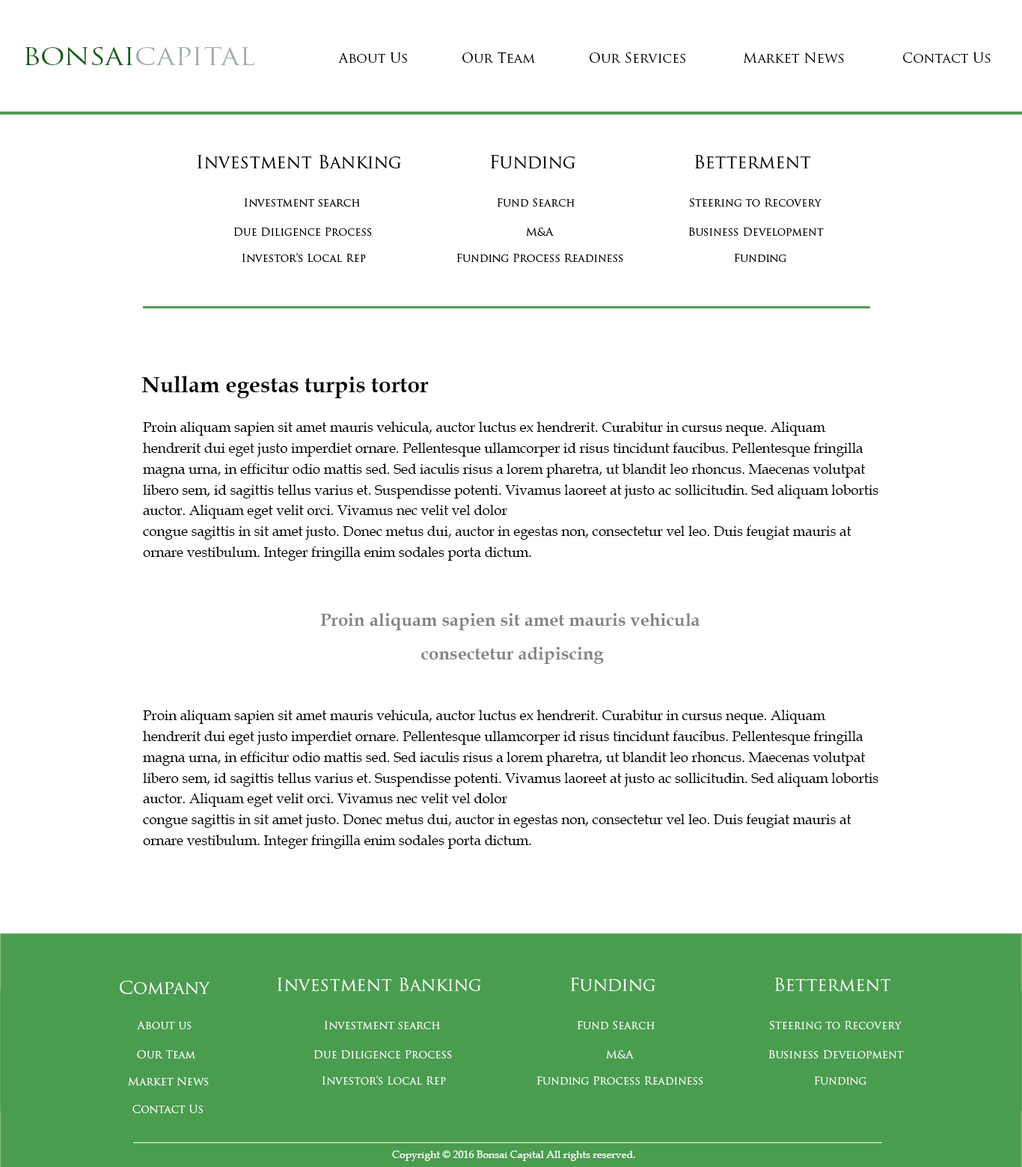
<style>
.page{position:relative;width:1022px;height:1167px;background:#ffffff}
.page>*{position:absolute;margin:0}
.t1{font:23.2px "TrajanPro-Regular";color:#a2ada5;scale:1.15 1}
.t2{font:23.2px "TrajanPro-Regular";color:#0e5c11;scale:1.15 1}
.t3{font:13.6px "TrajanPro-Regular";color:#000000}
.t4{font:18px "TrajanPro-Regular";color:#000000}
.t5{font:10.9px "TrajanPro-Regular";color:#000000}
.t6{font:22.4px "BookAntiqua-Bold";color:#000000}
.t7{font:13.9px/10.4px "BookAntiqua";color:#000000}
.t8{font:18px/11.2px "BookAntiqua-Bold";color:#828282}
.t9{font:18px "TrajanPro-Regular";color:#ffffff}
.t10{font:10.9px "TrajanPro-Regular";color:#ffffff}
.t11{font:10.5px "BookAntiqua";color:#ffffff}
</style>
<div class="page">
<p class="t1" style="left:25px;top:47px;width:229px;height:18px"><span class="t2">BONSAI</span>CAPITAL</p>
<p class="t3" style="left:338px;top:52px;width:69px;height:11px">About Us</p>
<p class="t3" style="left:462px;top:52px;width:73px;height:11px">Our Team</p>
<p class="t3" style="left:590px;top:52px;width:95px;height:11px">Our Services</p>
<p class="t3" style="left:743px;top:52px;width:101px;height:11px">Market News</p>
<p class="t3" style="left:903px;top:52px;width:88px;height:11px">Contact Us</p>
<p class="t4" style="left:198px;top:155px;width:203px;height:13px">Investment Banking</p>
<p class="t4" style="left:490px;top:155px;width:85px;height:14px">Funding</p>
<p class="t4" style="left:695px;top:155px;width:115px;height:13px">Betterment</p>
<p class="t5" style="left:245px;top:198px;width:115px;height:9px">Investment search</p>
<p class="t5" style="left:497px;top:198px;width:78px;height:9px">Fund Search</p>
<p class="t5" style="left:690px;top:198px;width:132px;height:9px">Steering to Recovery</p>
<p class="t5" style="left:233px;top:227px;width:139px;height:9px">Due Diligence Process</p>
<p class="t5" style="left:526px;top:227px;width:28px;height:9px">M&amp;A</p>
<p class="t5" style="left:688px;top:227px;width:136px;height:9px">Business Development</p>
<p class="t5" style="left:242px;top:253px;width:124px;height:9px">Investor’s Local Rep</p>
<p class="t5" style="left:456px;top:254px;width:167px;height:8px">Funding Process Readiness</p>
<p class="t5" style="left:734px;top:254px;width:52px;height:8px">Funding</p>
<p class="t6" style="left:141px;top:376px;width:288px;height:22px">Nullam egestas turpis tortor</p>
<p class="t7" style="left:143px;top:421px;width:735px;height:139px;text-align:right">Proin aliquam sapien sit amet mauris vehicula, auctor luctus ex hendrerit. Curabitur in cursus neque. Aliquam <br><br>hendrerit dui eget justo imperdiet ornare. Pellentesque ullamcorper id risus tincidunt faucibus. Pellentesque fringilla <br><br>magna urna, in efficitur odio mattis sed. Sed iaculis risus a lorem pharetra, ut blandit leo rhoncus. Maecenas volutpat <br><br>libero sem, id sagittis tellus varius et. Suspendisse potenti. Vivamus laoreet at justo ac sollicitudin. Sed aliquam lobortis <br><br>auctor. Aliquam eget velit orci. Vivamus nec velit vel dolor <br><br>congue sagittis in sit amet justo. Donec metus dui, auctor in egestas non, consectetur vel leo. Duis feugiat mauris at <br><br>ornare vestibulum. Integer fringilla enim sodales porta dictum.</p>
<p class="t8" style="left:320px;top:613px;width:380px;height:51px;text-align:center">Proin aliquam sapien sit amet mauris vehicula<br><br><br> consectetur adipiscing</p>
<p class="t7" style="left:143px;top:709px;width:735px;height:140px;text-align:right">Proin aliquam sapien sit amet mauris vehicula, auctor luctus ex hendrerit. Curabitur in cursus neque. Aliquam <br><br>hendrerit dui eget justo imperdiet ornare. Pellentesque ullamcorper id risus tincidunt faucibus. Pellentesque fringilla <br><br>magna urna, in efficitur odio mattis sed. Sed iaculis risus a lorem pharetra, ut blandit leo rhoncus. Maecenas volutpat <br><br>libero sem, id sagittis tellus varius et. Suspendisse potenti. Vivamus laoreet at justo ac sollicitudin. Sed aliquam lobortis <br><br>auctor. Aliquam eget velit orci. Vivamus nec velit vel dolor <br><br>congue sagittis in sit amet justo. Donec metus dui, auctor in egestas non, consectetur vel leo. Duis feugiat mauris at <br><br>ornare vestibulum. Integer fringilla enim sodales porta dictum.</p>
<p class="t9" style="left:278px;top:977px;width:203px;height:14px">Investment Banking</p>
<p class="t9" style="left:570px;top:977px;width:85px;height:14px">Funding</p>
<p class="t9" style="left:775px;top:977px;width:115px;height:14px">Betterment</p>
<p class="t9" style="left:120px;top:980px;width:90px;height:14px">Company</p>
<p class="t10" style="left:137px;top:1021px;width:55px;height:8px">About us</p>
<p class="t10" style="left:325px;top:1021px;width:115px;height:8px">Investment search</p>
<p class="t10" style="left:577px;top:1021px;width:78px;height:8px">Fund Search</p>
<p class="t10" style="left:770px;top:1021px;width:132px;height:8px">Steering to Recovery</p>
<p class="t10" style="left:137px;top:1050px;width:58px;height:8px">Our Team</p>
<p class="t10" style="left:314px;top:1050px;width:138px;height:9px">Due Diligence Process</p>
<p class="t10" style="left:606px;top:1050px;width:28px;height:8px">M&amp;A</p>
<p class="t10" style="left:768px;top:1050px;width:136px;height:9px">Business Development</p>
<p class="t10" style="left:128px;top:1077px;width:81px;height:8px">Market News</p>
<p class="t10" style="left:323px;top:1075px;width:123px;height:9px">Investor’s Local Rep</p>
<p class="t10" style="left:537px;top:1076px;width:166px;height:8px">Funding Process Readiness</p>
<p class="t10" style="left:814px;top:1076px;width:53px;height:8px">Funding</p>
<p class="t10" style="left:132px;top:1104px;width:71px;height:9px">Contact Us</p>
<p class="t11" style="left:392px;top:1150px;width:243px;height:11px">Copyright © 2016 Bonsai Capital All rights reserved.</p>
</div>
